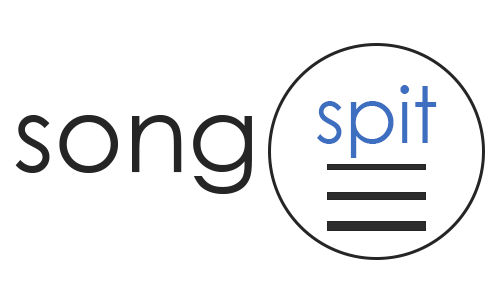
<style>
.page{position:relative;width:500px;height:300px;background:#ffffff}
.page>*{position:absolute;margin:0}
.t1{font:77px "CenturyGothic";color:#3d6ebf}
.t2{font:105.8px "CenturyGothic";color:#252525}
</style>
<div class="page">
<p class="t1" style="left:317px;top:85px;width:120px;height:73px">spit</p>
<p class="t2" style="left:15px;top:115px;width:237px;height:79px">song</p>
</div>
